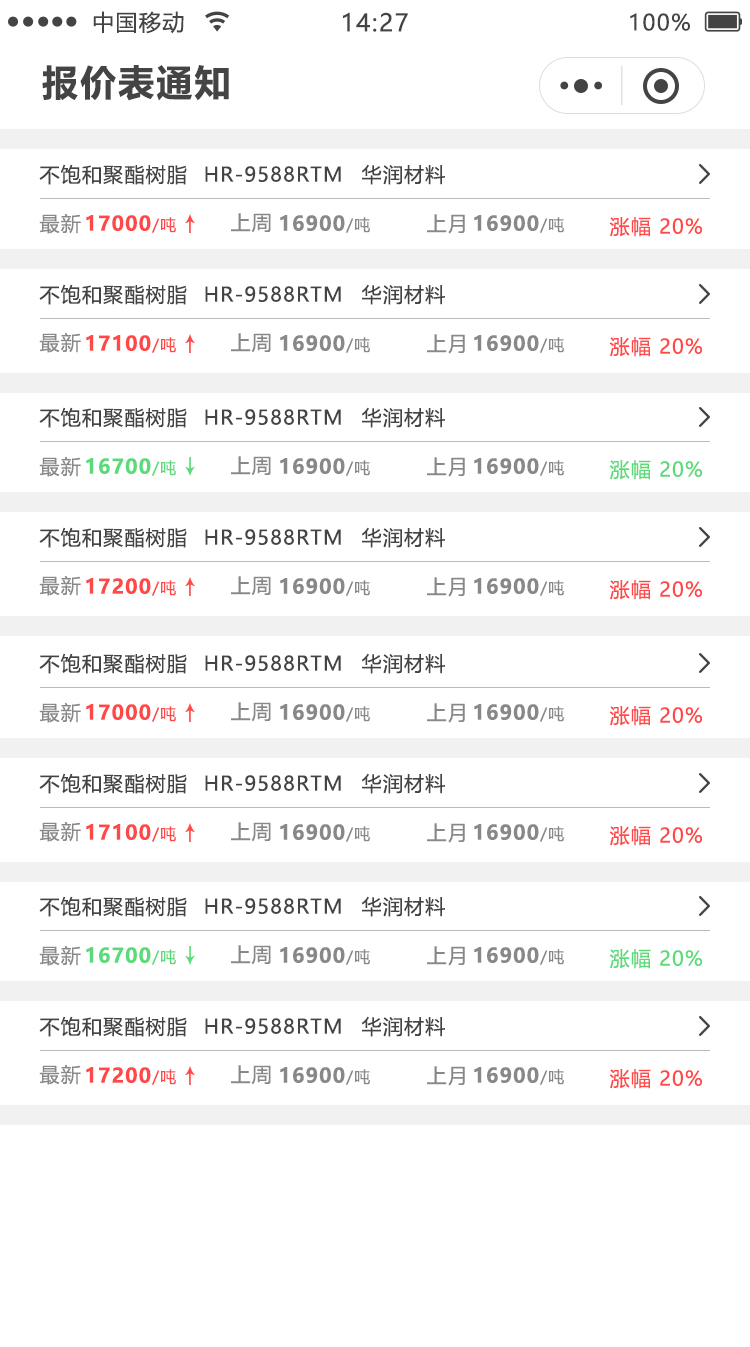
<style>
.page{position:relative;width:750px;height:1347px;background:#ffffff}
.page>*{position:absolute;margin:0}
.t1{font:22px "MicrosoftYaHeiUI";letter-spacing:0.06em;color:#444444}
.t2{font:24px "MicrosoftYaHeiUI";letter-spacing:0.06em;color:#444444}
.t3{font:36px "MicrosoftYaHeiUI-Bold";letter-spacing:0.06em;color:#444444}
.t4{font:20px "MicrosoftYaHeiUI";letter-spacing:0.06em;color:#444444}
.t5{font:20px "MicrosoftYaHeiUI";letter-spacing:0.06em;color:#888888}
.t6{font:20px "MicrosoftYaHeiUI-Bold";letter-spacing:0.06em;color:#ff4848}
.t7{font:16px "MicrosoftYaHeiUI";letter-spacing:0.06em;color:#ff4848}
.t8{font:20px "MicrosoftYaHeiUI-Bold";letter-spacing:0.06em;color:#888888}
.t9{font:16px "MicrosoftYaHeiUI";letter-spacing:0.06em;color:#888888}
.t10{font:20px "MicrosoftYaHeiUI";letter-spacing:0.06em;color:#ff4848}
.t11{font:20px "MicrosoftYaHeiUI-Bold";letter-spacing:0.06em;color:#5ada78}
.t12{font:16px "MicrosoftYaHeiUI";letter-spacing:0.06em;color:#5ada78}
.t13{font:20px "MicrosoftYaHeiUI";letter-spacing:0.06em;color:#5ada78}
</style>
<div class="page">
<p class="t1" style="left:93px;top:11px;width:91px;height:23px">中国移动</p>
<p class="t2" style="left:343px;top:12px;width:65px;height:20px">14:27</p>
<p class="t1" style="left:630px;top:13px;width:60px;height:18px">100%</p>
<p class="t3" style="left:42px;top:65px;width:187px;height:36px">报价表通知</p>
<p class="t4" style="left:39px;top:164px;width:148px;height:21px">不饱和聚酯树脂</p>
<p class="t4" style="left:205px;top:166px;width:136px;height:16px">HR-9588RTM</p>
<p class="t4" style="left:362px;top:164px;width:83px;height:21px">华润材料</p>
<p class="t5" style="left:39px;top:213px;width:42px;height:21px">最新</p>
<p class="t6" style="left:86px;top:215px;width:90px;height:18px">17000<span class="t7">/吨</span></p>
<p class="t5" style="left:231px;top:213px;width:40px;height:20px">上周</p>
<p class="t8" style="left:280px;top:215px;width:90px;height:18px">16900<span class="t9">/吨</span></p>
<p class="t5" style="left:427px;top:214px;width:38px;height:20px">上月</p>
<p class="t8" style="left:474px;top:215px;width:90px;height:18px">16900<span class="t9">/吨</span></p>
<p class="t10" style="left:609px;top:217px;width:93px;height:20px">涨幅 20%</p>
<p class="t4" style="left:39px;top:284px;width:148px;height:21px">不饱和聚酯树脂</p>
<p class="t4" style="left:205px;top:286px;width:136px;height:16px">HR-9588RTM</p>
<p class="t4" style="left:362px;top:284px;width:83px;height:21px">华润材料</p>
<p class="t5" style="left:39px;top:332px;width:42px;height:21px">最新</p>
<p class="t6" style="left:86px;top:335px;width:90px;height:18px">17100<span class="t7">/吨</span></p>
<p class="t5" style="left:231px;top:333px;width:40px;height:20px">上周</p>
<p class="t8" style="left:280px;top:335px;width:90px;height:18px">16900<span class="t9">/吨</span></p>
<p class="t5" style="left:427px;top:334px;width:38px;height:20px">上月</p>
<p class="t8" style="left:474px;top:335px;width:90px;height:18px">16900<span class="t9">/吨</span></p>
<p class="t10" style="left:609px;top:337px;width:93px;height:20px">涨幅 20%</p>
<p class="t4" style="left:39px;top:407px;width:148px;height:21px">不饱和聚酯树脂</p>
<p class="t4" style="left:205px;top:409px;width:136px;height:16px">HR-9588RTM</p>
<p class="t4" style="left:362px;top:407px;width:83px;height:21px">华润材料</p>
<p class="t5" style="left:39px;top:456px;width:42px;height:21px">最新</p>
<p class="t11" style="left:86px;top:458px;width:90px;height:18px">16700<span class="t12">/吨</span></p>
<p class="t5" style="left:231px;top:456px;width:40px;height:20px">上周</p>
<p class="t8" style="left:280px;top:458px;width:90px;height:18px">16900<span class="t9">/吨</span></p>
<p class="t5" style="left:427px;top:457px;width:38px;height:20px">上月</p>
<p class="t8" style="left:474px;top:458px;width:90px;height:18px">16900<span class="t9">/吨</span></p>
<p class="t13" style="left:609px;top:460px;width:93px;height:20px">涨幅 20%</p>
<p class="t4" style="left:39px;top:527px;width:148px;height:21px">不饱和聚酯树脂</p>
<p class="t4" style="left:205px;top:529px;width:136px;height:16px">HR-9588RTM</p>
<p class="t4" style="left:362px;top:527px;width:83px;height:21px">华润材料</p>
<p class="t5" style="left:39px;top:575px;width:42px;height:21px">最新</p>
<p class="t6" style="left:86px;top:578px;width:90px;height:18px">17200<span class="t7">/吨</span></p>
<p class="t5" style="left:231px;top:576px;width:40px;height:20px">上周</p>
<p class="t8" style="left:280px;top:578px;width:90px;height:18px">16900<span class="t9">/吨</span></p>
<p class="t5" style="left:427px;top:577px;width:38px;height:20px">上月</p>
<p class="t8" style="left:474px;top:578px;width:90px;height:18px">16900<span class="t9">/吨</span></p>
<p class="t10" style="left:609px;top:580px;width:93px;height:20px">涨幅 20%</p>
<p class="t4" style="left:39px;top:653px;width:148px;height:21px">不饱和聚酯树脂</p>
<p class="t4" style="left:362px;top:653px;width:83px;height:21px">华润材料</p>
<p class="t4" style="left:205px;top:655px;width:136px;height:16px">HR-9588RTM</p>
<p class="t5" style="left:39px;top:702px;width:42px;height:21px">最新</p>
<p class="t5" style="left:231px;top:702px;width:40px;height:20px">上周</p>
<p class="t6" style="left:86px;top:704px;width:90px;height:18px">17000<span class="t7">/吨</span></p>
<p class="t8" style="left:280px;top:704px;width:90px;height:18px">16900<span class="t9">/吨</span></p>
<p class="t5" style="left:427px;top:703px;width:38px;height:20px">上月</p>
<p class="t8" style="left:474px;top:704px;width:90px;height:18px">16900<span class="t9">/吨</span></p>
<p class="t10" style="left:609px;top:706px;width:93px;height:20px">涨幅 20%</p>
<p class="t4" style="left:39px;top:773px;width:148px;height:21px">不饱和聚酯树脂</p>
<p class="t4" style="left:362px;top:773px;width:83px;height:21px">华润材料</p>
<p class="t4" style="left:205px;top:775px;width:136px;height:16px">HR-9588RTM</p>
<p class="t5" style="left:39px;top:821px;width:42px;height:21px">最新</p>
<p class="t5" style="left:231px;top:822px;width:40px;height:20px">上周</p>
<p class="t6" style="left:86px;top:824px;width:90px;height:18px">17100<span class="t7">/吨</span></p>
<p class="t8" style="left:280px;top:824px;width:90px;height:18px">16900<span class="t9">/吨</span></p>
<p class="t5" style="left:427px;top:823px;width:38px;height:20px">上月</p>
<p class="t8" style="left:474px;top:824px;width:90px;height:18px">16900<span class="t9">/吨</span></p>
<p class="t10" style="left:609px;top:826px;width:93px;height:20px">涨幅 20%</p>
<p class="t4" style="left:39px;top:896px;width:148px;height:21px">不饱和聚酯树脂</p>
<p class="t4" style="left:205px;top:898px;width:136px;height:16px">HR-9588RTM</p>
<p class="t4" style="left:362px;top:896px;width:83px;height:21px">华润材料</p>
<p class="t5" style="left:39px;top:945px;width:42px;height:21px">最新</p>
<p class="t11" style="left:86px;top:947px;width:90px;height:18px">16700<span class="t12">/吨</span></p>
<p class="t5" style="left:231px;top:945px;width:40px;height:20px">上周</p>
<p class="t8" style="left:280px;top:947px;width:90px;height:18px">16900<span class="t9">/吨</span></p>
<p class="t5" style="left:427px;top:946px;width:38px;height:20px">上月</p>
<p class="t8" style="left:474px;top:947px;width:90px;height:18px">16900<span class="t9">/吨</span></p>
<p class="t13" style="left:609px;top:949px;width:93px;height:20px">涨幅 20%</p>
<p class="t4" style="left:39px;top:1016px;width:148px;height:21px">不饱和聚酯树脂</p>
<p class="t4" style="left:205px;top:1018px;width:136px;height:16px">HR-9588RTM</p>
<p class="t4" style="left:362px;top:1016px;width:83px;height:21px">华润材料</p>
<p class="t5" style="left:39px;top:1064px;width:42px;height:21px">最新</p>
<p class="t6" style="left:86px;top:1067px;width:90px;height:18px">17200<span class="t7">/吨</span></p>
<p class="t5" style="left:231px;top:1065px;width:40px;height:20px">上周</p>
<p class="t8" style="left:280px;top:1067px;width:90px;height:18px">16900<span class="t9">/吨</span></p>
<p class="t5" style="left:427px;top:1066px;width:38px;height:20px">上月</p>
<p class="t8" style="left:474px;top:1067px;width:90px;height:18px">16900<span class="t9">/吨</span></p>
<p class="t10" style="left:609px;top:1069px;width:93px;height:20px">涨幅 20%</p>
</div>
